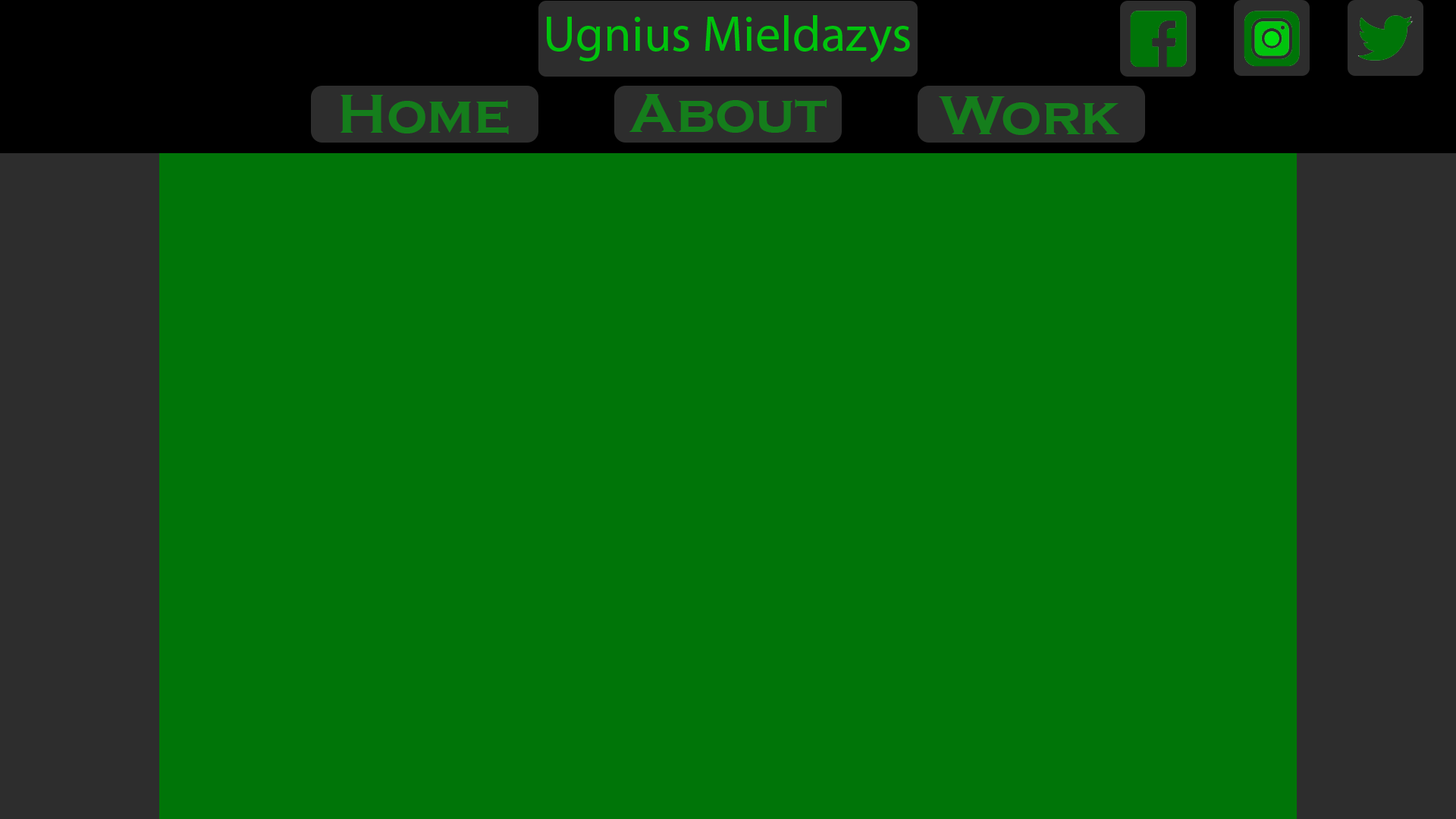
<style>
.page{position:relative;width:1456px;height:819px;background:#007508}
.page>*{position:absolute;margin:0}
.t1{font:56.9px "CopperplateGothic-Bold";color:#157e1c}
</style>
<div class="page">
<p class="t1" style="left:340px;top:95px;width:169px;height:39px">Home</p>
<p class="t1" style="left:629px;top:94px;width:198px;height:39px">About</p>
<p class="t1" style="left:939px;top:96px;width:180px;height:39px">Work</p>
</div>
